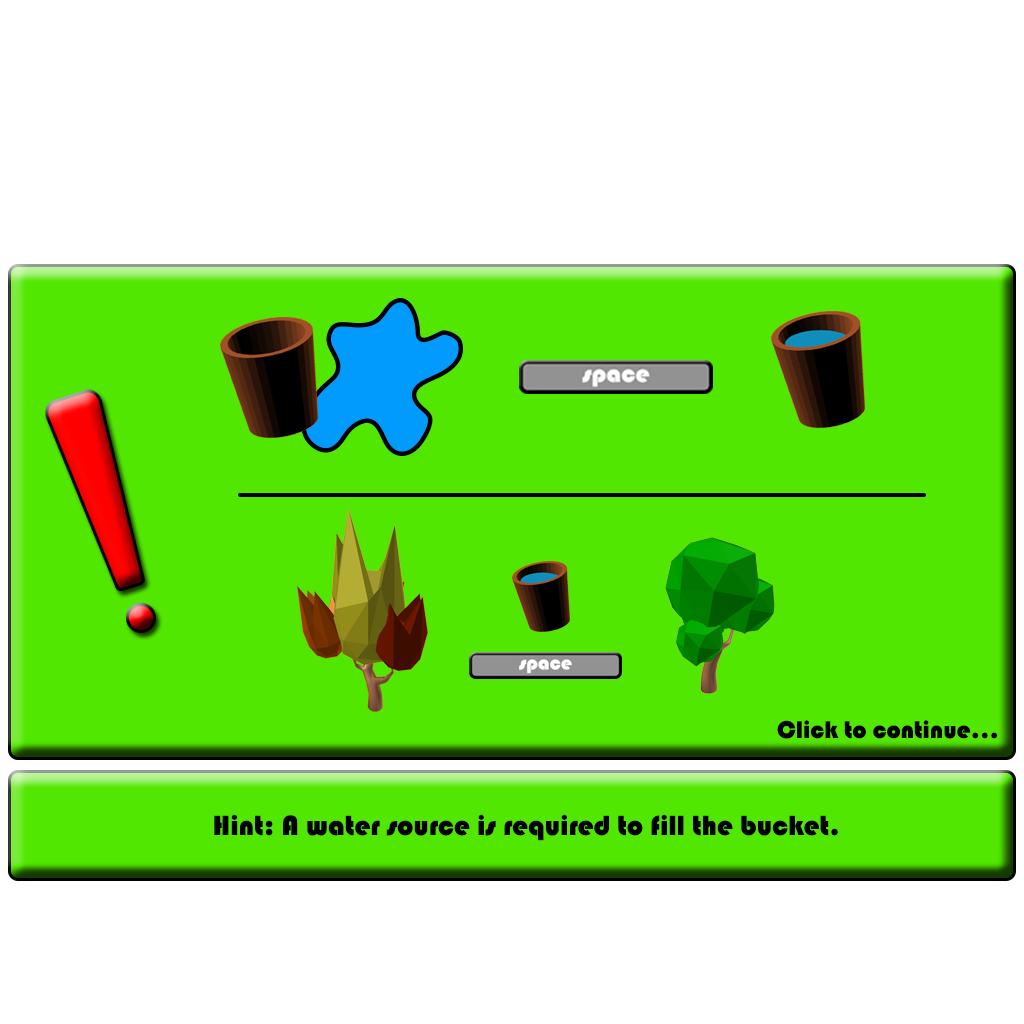
<style>
.page{position:relative;width:1024px;height:1024px;background:#ffffff}
.page>*{position:absolute;margin:0}
.t1{font:25px "Bauhaus93";color:#000000}
.t2{font:28.7px "Bauhaus93";color:#000000}
</style>
<div class="page">
<p class="t1" style="left:777px;top:720px;width:221px;height:19px">Click to continue...</p>
<p class="t2" style="left:214px;top:814px;width:624px;height:27px">Hint: A water source is required to fill the bucket.</p>
</div>
